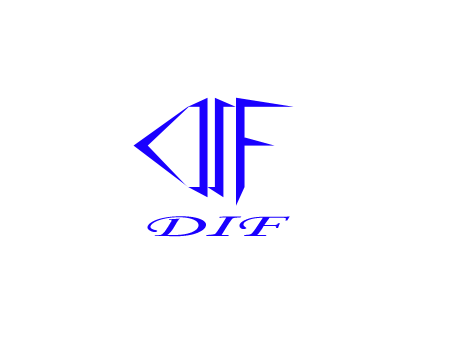
<style>
.page{position:relative;width:454px;height:340px;background:#ffffff}
.page>*{position:absolute;margin:0}
.t1{font:33.6px "MonotypeCorsiva";letter-spacing:0.02em;color:#1a00ff;scale:2.56 1}
</style>
<div class="page">
<p class="t1" style="left:147px;top:216px;width:143px;height:21px">DIF</p>
</div>
